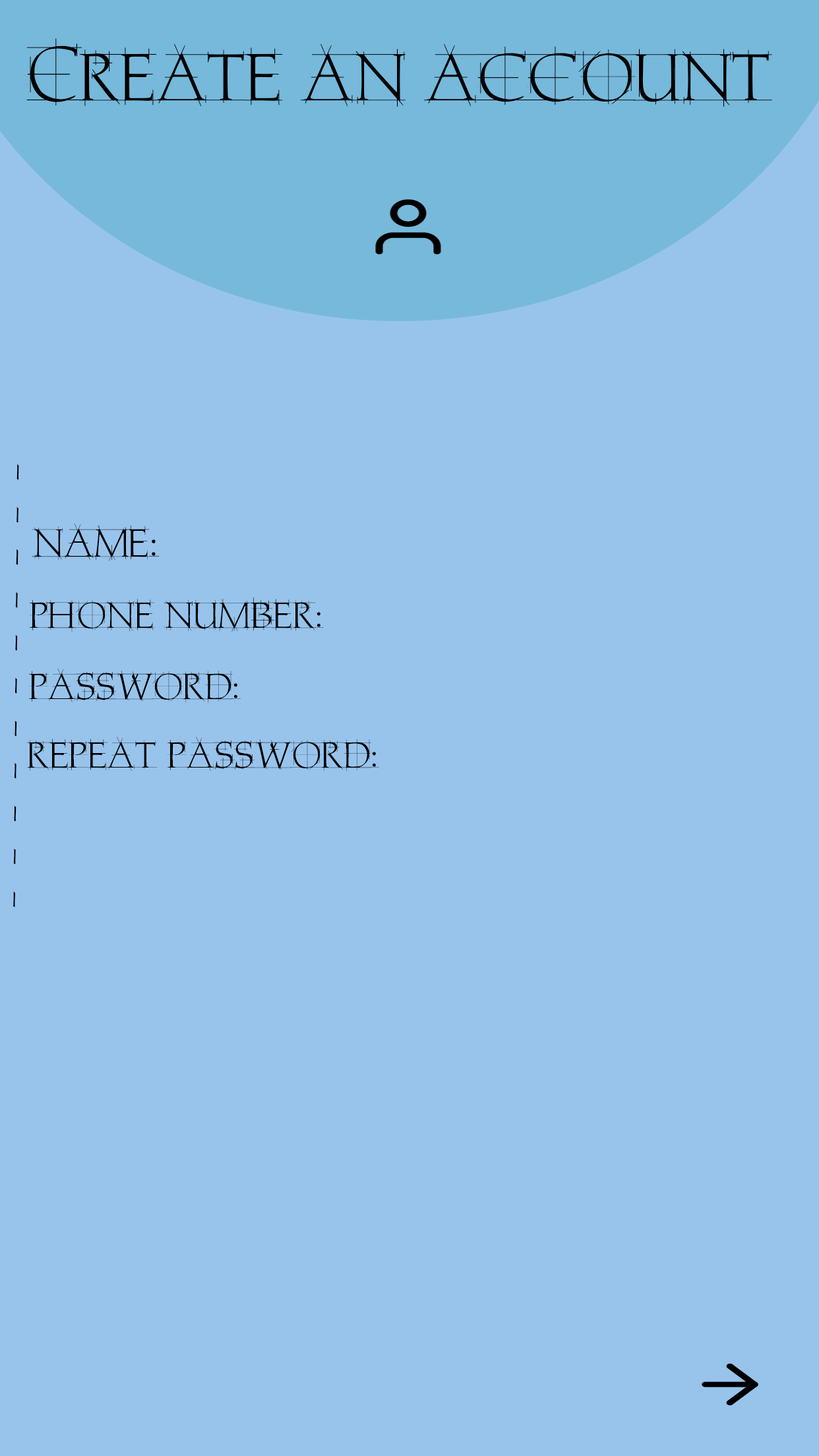
<style>
.page{position:relative;width:819px;height:1456px;background:#98c4ec}
.page>*{position:absolute;margin:0}
.t1{font:72.5px "Home-Remedy-PS";color:#000000}
.t2{font:33px "Home-Remedy-PS";color:#000000;scale:2.12 1}
.t3{font:42.9px "Home-Remedy-PS";color:#000000}
.t4{font:39.6px "Home-Remedy-PS";color:#000000}
</style>
<div class="page">
<p class="t1" style="left:26px;top:38px;width:746px;height:69px">Create an account</p>
<p class="t2" style="left:13px;top:464px;width:6px;height:443px;rotate:90deg">- - - - - - - - - - -</p>
<p class="t3" style="left:32px;top:523px;width:128px;height:38px">:name</p>
<p class="t4" style="left:29px;top:597px;width:295px;height:35px">:phone number</p>
<p class="t4" style="left:28px;top:668px;width:213px;height:35px">:password</p>
<p class="t4" style="left:26px;top:737px;width:353px;height:35px">:repeat password</p>
</div>
